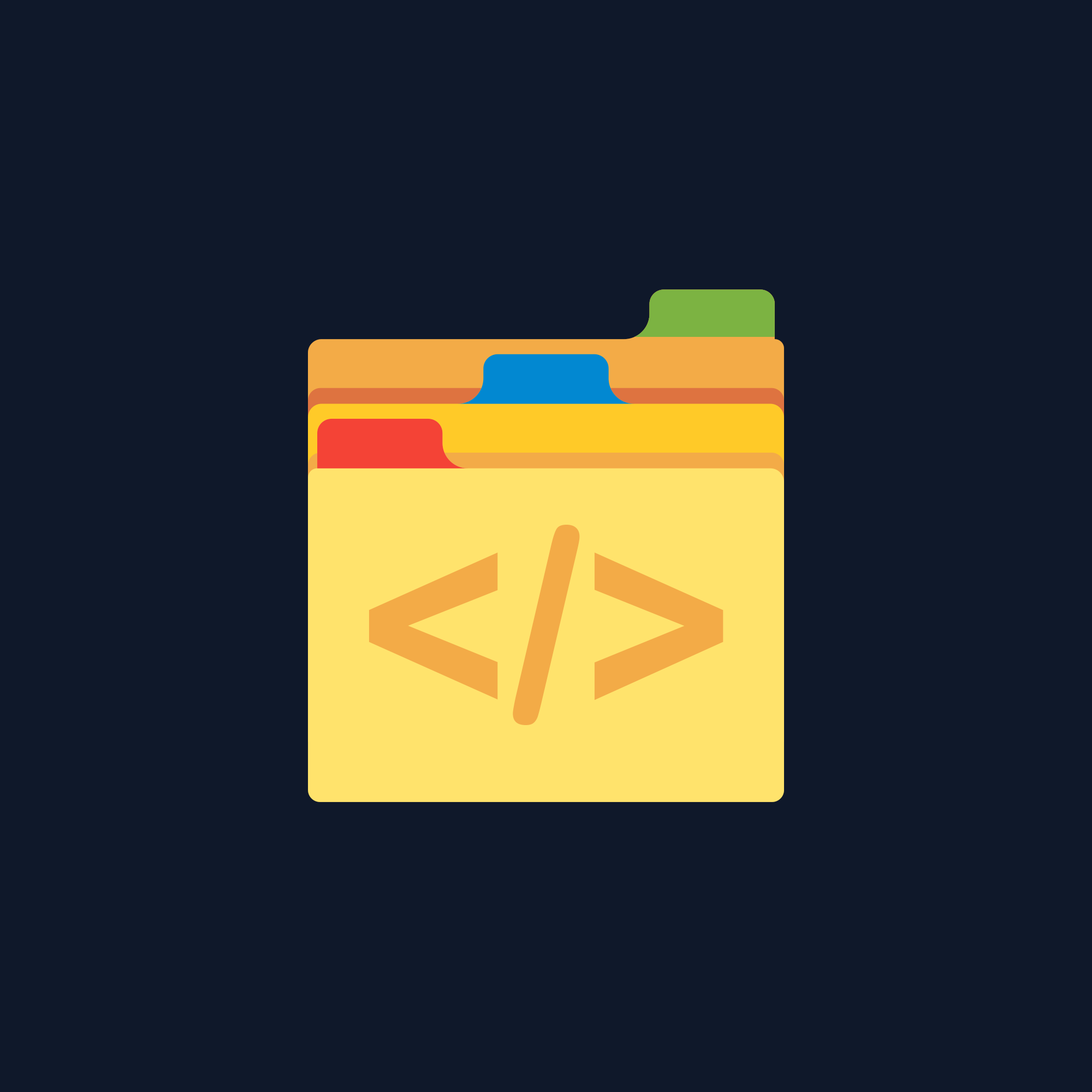
<style>
.page{position:relative;width:1092px;height:1092px;background:#0f182a}
.page>*{position:absolute;margin:0}
.t1{font:270.9px "ArialRoundedMTBold";color:#f3ab47;scale:0.96 1}
</style>
<div class="page">
<p class="t1" style="left:369px;top:525px;width:354px;height:200px">&lt;/&gt;</p>
</div>
